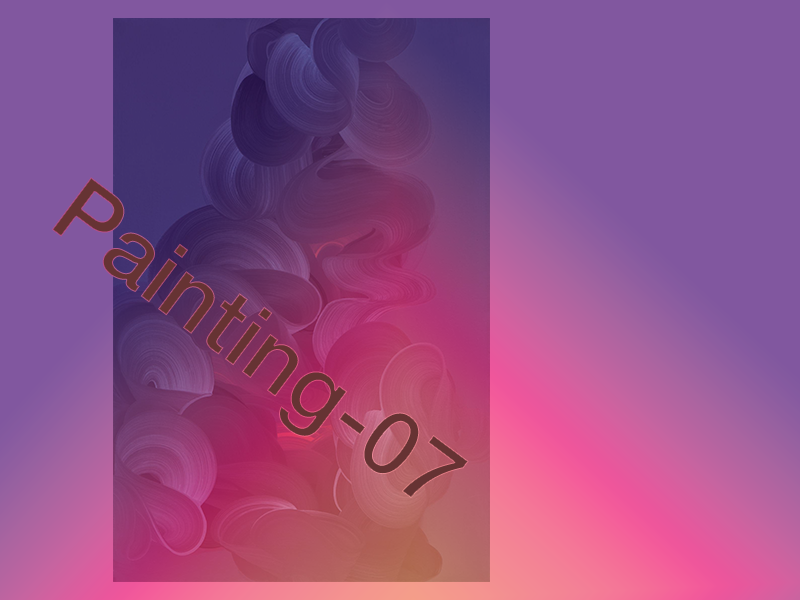
<style>
.page{position:relative;width:800px;height:600px;background:#81579f}
.page>*{position:absolute;margin:0}
.t1{font:38.7px "HelveticaNeue-Medium";color:#663333}
</style>
<div class="page">
<p class="t1" style="left:52px;top:177px;width:417px;height:321px;rotate:37deg">Painting-07</p>
</div>
